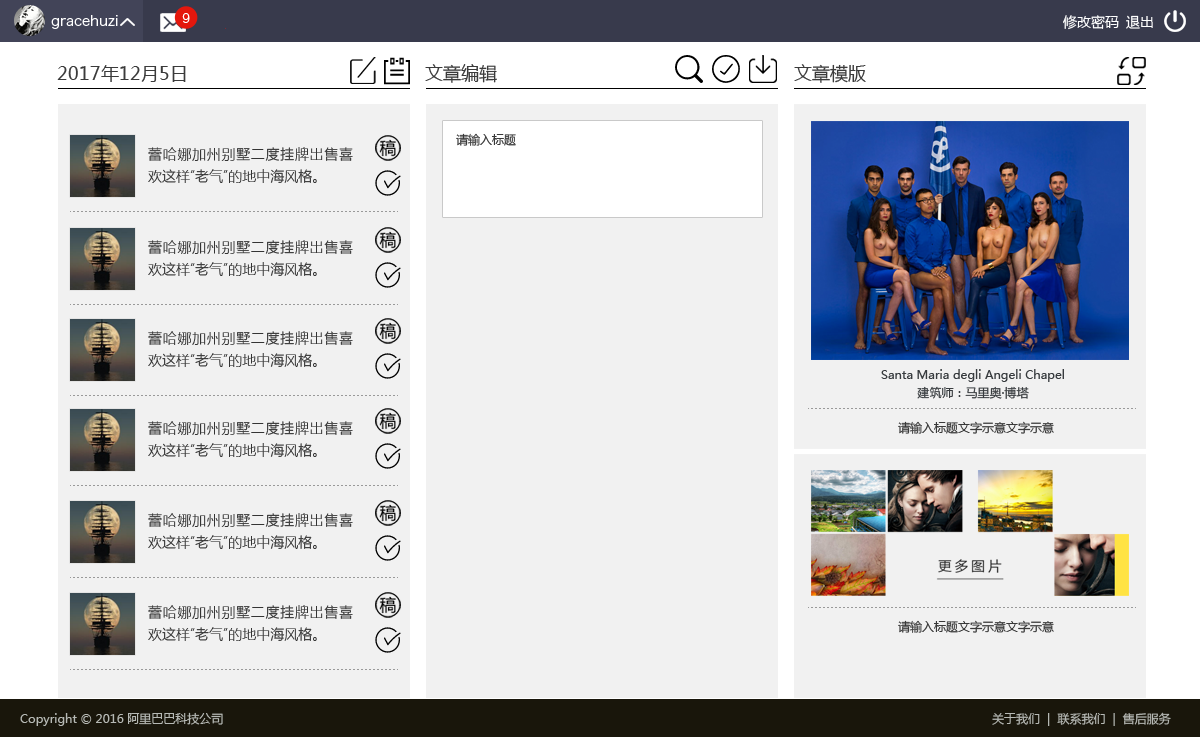
<style>
.page{position:relative;width:1200px;height:737px;background:#f1f1f1}
.page>*{position:absolute;margin:0}
.t1{font:14px "HiraginoSansGB-W3";color:#ffffff}
.t2{font:12px "HiraginoSansGB-W3";color:#ffffff}
.t3{font:14px "MicrosoftYaHei";color:#ffffff}
.t4{font:18px "MicrosoftYaHei";color:#3b3b3b}
.t5{font:12px "MicrosoftYaHei";color:#393939}
.t6{font:14px/22px "MicrosoftYaHeiLight";color:#343434}
.t7{font:12px/18px "MicrosoftYaHei";color:#373b3e}
.t8{font:12px "MicrosoftYaHei";color:#b6b9b5}
</style>
<div class="page">
<p class="t1" style="left:51px;top:15px;width:67px;height:14px">gracehuzi</p>
<p class="t2" style="left:182px;top:13px;width:8px;height:10px">9</p>
<p class="t3" style="left:1063px;top:15px;width:56px;height:15px">修改密码</p>
<p class="t3" style="left:1126px;top:15px;width:27px;height:14px">退出</p>
<p class="t4" style="left:57px;top:65px;width:129px;height:17px">2017年12月5日</p>
<p class="t4" style="left:425px;top:64px;width:72px;height:19px">文章编辑</p>
<p class="t4" style="left:794px;top:64px;width:72px;height:19px">文章模版</p>
<p class="t5" style="left:456px;top:133px;width:60px;height:13px">请输入标题</p>
<p class="t6" style="left:148px;top:147px;width:205px;height:36px;text-align:justify">蕾哈娜加州别墅二度挂牌出售喜欢这样“老气”的地中海风格。</p>
<p class="t6" style="left:148px;top:240px;width:205px;height:36px;text-align:justify">蕾哈娜加州别墅二度挂牌出售喜欢这样“老气”的地中海风格。</p>
<p class="t6" style="left:148px;top:331px;width:205px;height:36px;text-align:justify">蕾哈娜加州别墅二度挂牌出售喜欢这样“老气”的地中海风格。</p>
<p class="t7" style="left:881px;top:369px;width:183px;height:30px;text-align:center">Santa Maria degli Angeli Chapel<br>建筑师：马里奥·博塔</p>
<p class="t6" style="left:148px;top:421px;width:205px;height:36px;text-align:justify">蕾哈娜加州别墅二度挂牌出售喜欢这样“老气”的地中海风格。</p>
<p class="t5" style="left:898px;top:421px;width:156px;height:13px">请输入标题文字示意文字示意</p>
<p class="t6" style="left:148px;top:513px;width:205px;height:36px;text-align:justify">蕾哈娜加州别墅二度挂牌出售喜欢这样“老气”的地中海风格。</p>
<p class="t6" style="left:148px;top:605px;width:205px;height:36px;text-align:justify">蕾哈娜加州别墅二度挂牌出售喜欢这样“老气”的地中海风格。</p>
<p class="t5" style="left:898px;top:620px;width:156px;height:13px">请输入标题文字示意文字示意</p>
<p class="t8" style="left:20px;top:712px;width:203px;height:14px">Copyright © 2016 阿里巴巴科技公司</p>
<p class="t8" style="left:992px;top:712px;width:179px;height:14px">关于我们  |  联系我们  |  售后服务</p>
</div>
